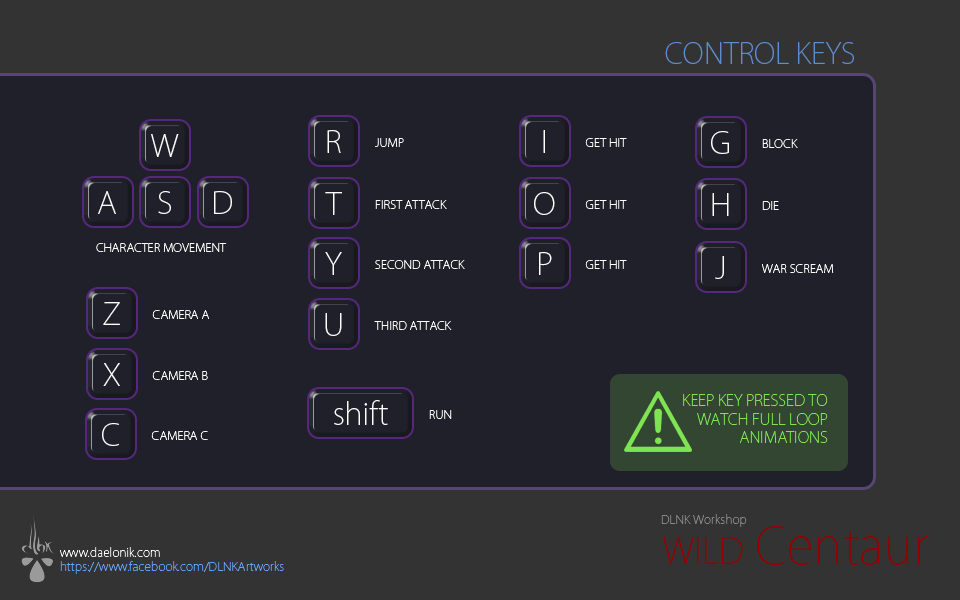
<style>
.page{position:relative;width:960px;height:600px;background:#20202a}
.page>*{position:absolute;margin:0}
.t1{font:28.5px "KozGoPr6N-ExtraLight";color:#5e8cd2}
.t2{font:30.4px "KozGoPr6N-ExtraLight";color:#ffffff}
.t3{font:12px "KozGoPr6N-ExtraLight";color:#ffffff}
.t4{font:15.4px "KozGoPr6N-ExtraLight";color:#7ee451}
.t5{font:12px "KozGoPr6N-ExtraLight";color:#8a8a8a}
.t6{font:49.5px "KozGoPr6N-ExtraLight";color:#940101}
.t7{font:49.5px "KozGoPr6N-ExtraLight";color:#940101;font-variant:small-caps}
.t8{font:12px "KozGoPr6N-ExtraLight";color:#64a5fe}
</style>
<div class="page">
<p class="t1" style="left:665px;top:42px;width:189px;height:22px">CONTROL KEYS</p>
<p class="t2" style="left:151px;top:134px;width:28px;height:23px">W</p>
<p class="t2" style="left:327px;top:130px;width:14px;height:23px">R</p>
<p class="t2" style="left:543px;top:130px;width:2px;height:23px">I</p>
<p class="t2" style="left:711px;top:131px;width:18px;height:23px">G</p>
<p class="t3" style="left:375px;top:138px;width:29px;height:9px">JUMP</p>
<p class="t3" style="left:585px;top:138px;width:42px;height:9px">GET HIT</p>
<p class="t3" style="left:762px;top:139px;width:36px;height:9px">BLOCK</p>
<p class="t2" style="left:98px;top:191px;width:18px;height:23px">A</p>
<p class="t2" style="left:158px;top:191px;width:13px;height:23px">S</p>
<p class="t2" style="left:214px;top:191px;width:18px;height:23px">D</p>
<p class="t2" style="left:325px;top:192px;width:17px;height:23px">T</p>
<p class="t2" style="left:534px;top:192px;width:21px;height:23px">O</p>
<p class="t2" style="left:712px;top:193px;width:17px;height:23px">H</p>
<p class="t3" style="left:375px;top:200px;width:72px;height:9px">FIRST ATTACK</p>
<p class="t3" style="left:585px;top:200px;width:42px;height:9px">GET HIT</p>
<p class="t3" style="left:762px;top:201px;width:17px;height:9px">DIE</p>
<p class="t3" style="left:96px;top:243px;width:131px;height:9px">CHARACTER MOVEMENT</p>
<p class="t2" style="left:325px;top:252px;width:17px;height:23px">Y</p>
<p class="t2" style="left:539px;top:252px;width:13px;height:23px">P</p>
<p class="t2" style="left:715px;top:256px;width:9px;height:23px">J</p>
<p class="t3" style="left:375px;top:260px;width:90px;height:9px">SECOND ATTACK</p>
<p class="t3" style="left:585px;top:260px;width:42px;height:9px">GET HIT</p>
<p class="t3" style="left:762px;top:264px;width:72px;height:9px">WAR SCREAM</p>
<p class="t2" style="left:103px;top:302px;width:17px;height:23px">Z</p>
<p class="t3" style="left:152px;top:310px;width:57px;height:9px">CAMERA A</p>
<p class="t2" style="left:325px;top:313px;width:17px;height:23px">U</p>
<p class="t3" style="left:374px;top:321px;width:78px;height:9px">THIRD ATTACK</p>
<p class="t2" style="left:103px;top:363px;width:17px;height:23px">X</p>
<p class="t3" style="left:152px;top:371px;width:56px;height:9px">CAMERA B</p>
<p class="t2" style="left:334px;top:400px;width:54px;height:25px">shift</p>
<p class="t4" style="left:683px;top:394px;width:145px;height:49px;text-align:right">KEEP KEY PRESSED TO<br>WATCH FULL LOOP<br>ANIMATIONS</p>
<p class="t3" style="left:429px;top:410px;width:23px;height:9px">RUN</p>
<p class="t2" style="left:102px;top:423px;width:17px;height:23px">C</p>
<p class="t3" style="left:151px;top:431px;width:57px;height:9px">CAMERA C</p>
<p class="t5" style="left:661px;top:514px;width:86px;height:13px">DLNK Workshop</p>
<p class="t6" style="left:663px;top:526px;width:266px;height:39px"><span class="t7">wild </span>Centaur</p>
<p class="t8" style="left:60px;top:547px;width:224px;height:27px"><span class="t3">www.daelonik.com<br></span>https://www.facebook.com/DLNKArtworks</p>
</div>
